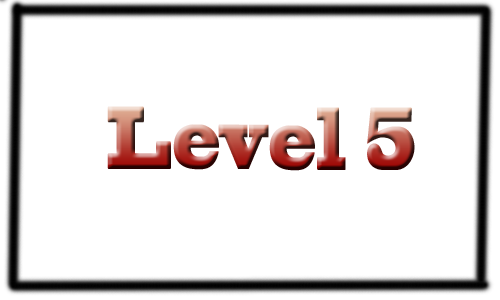
<style>
.page{position:relative;width:500px;height:300px;background:#ffffff}
.page>*{position:absolute;margin:0}
.t1{font:83.3px "BlackoakStd";scale:0.44 1}
</style>
<div class="page">
<p class="t1" style="left:107px;top:106px;width:308px;height:65px">Level 5</p>
</div>
